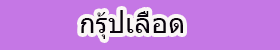
<style>
.page{position:relative;width:280px;height:50px;background:#c577e5}
.page>*{position:absolute;margin:0}
.t1{font:27.8px "Tahoma";color:#09020c}
</style>
<div class="page">
<p class="t1" style="left:81px;top:10px;width:102px;height:29px">กรุ้ปเลือด</p>
</div>
